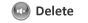
<style>
.page{position:relative;width:88px;height:23px;background:#ffffff}
.page>*{position:absolute;margin:0}
.t1{font:14px "Calibri-Bold";color:#363535}
</style>
<div class="page">
<p class="t1" style="left:36px;top:5px;width:38px;height:11px">Delete</p>
</div>
